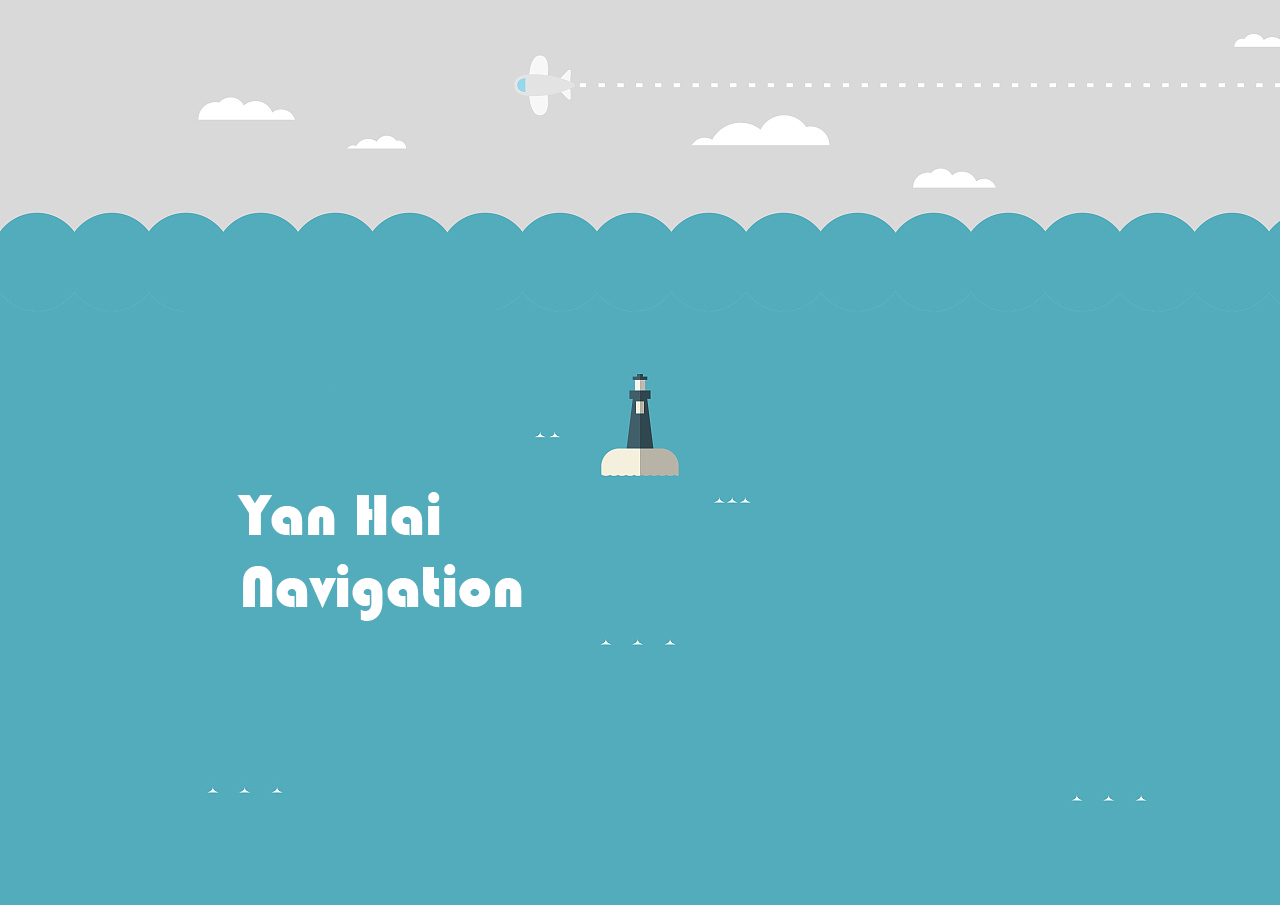
<style>
.page{position:relative;width:1280px;height:905px;background:#53acbc}
.page>*{position:absolute;margin:0}
.t1{font:60px "Bauhaus93";color:#ffffff}
</style>
<div class="page">
<p class="t1" style="left:237px;top:492px;width:285px;height:129px">Yan Hai<br>Navigation</p>
</div>
